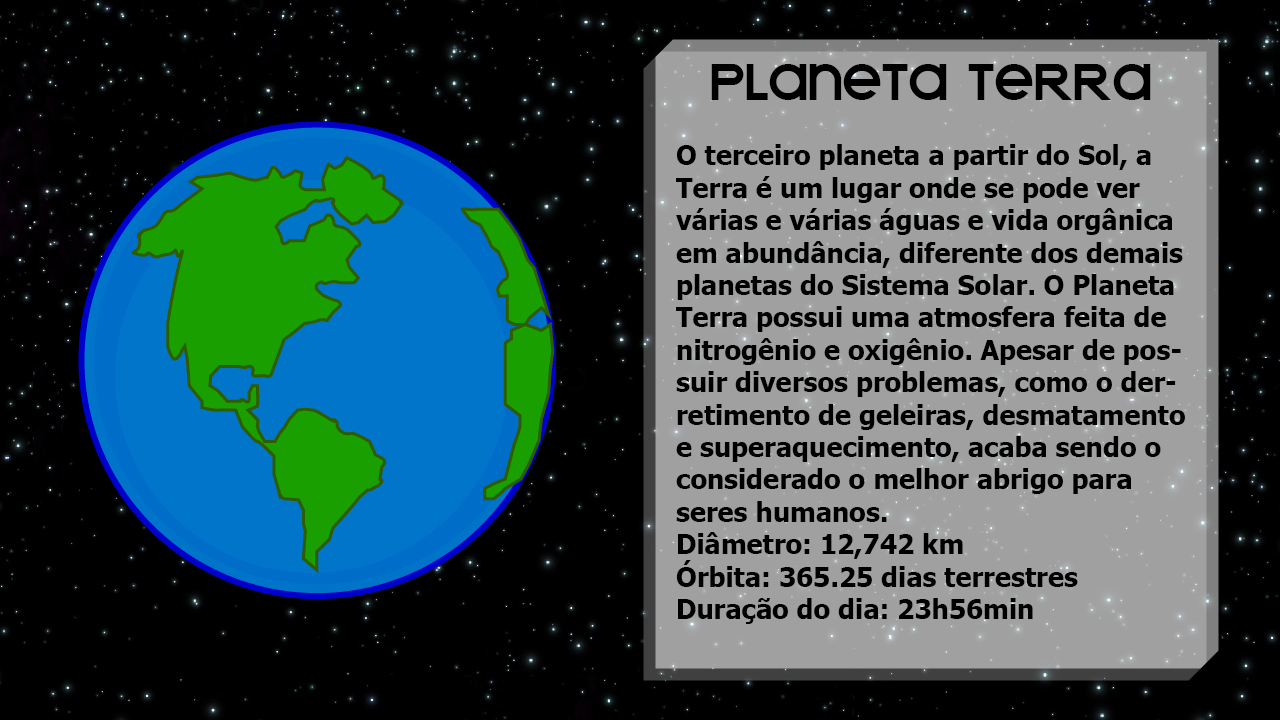
<style>
.page{position:relative;width:1280px;height:720px;background:#000000}
.page>*{position:absolute;margin:0}
.t1{font:58px "KravitzExtraThermal";color:#000000}
.t2{font:27px "Tahoma-Bold";color:#000000}
</style>
<div class="page">
<p class="t1" style="left:711px;top:64px;width:440px;height:36px">PLANETA TERRA</p>
<p class="t2" style="left:676px;top:144px;width:509px;height:480px">O terceiro planeta a partir do Sol, a Terra é um lugar onde se pode ver várias e várias águas e vida orgânica em abundância, diferente dos demais planetas do Sistema Solar. O Planeta Terra possui uma atmosfera feita de nitrogênio e oxigênio. Apesar de possuir diversos problemas, como o derretimento de geleiras, desmatamento e superaquecimento, acaba sendo o considerado o melhor abrigo para seres humanos.<br>Diâmetro: 12,742 km<br>Órbita: 365.25 dias terrestres<br>Duração do dia: 23h56min</p>
</div>
